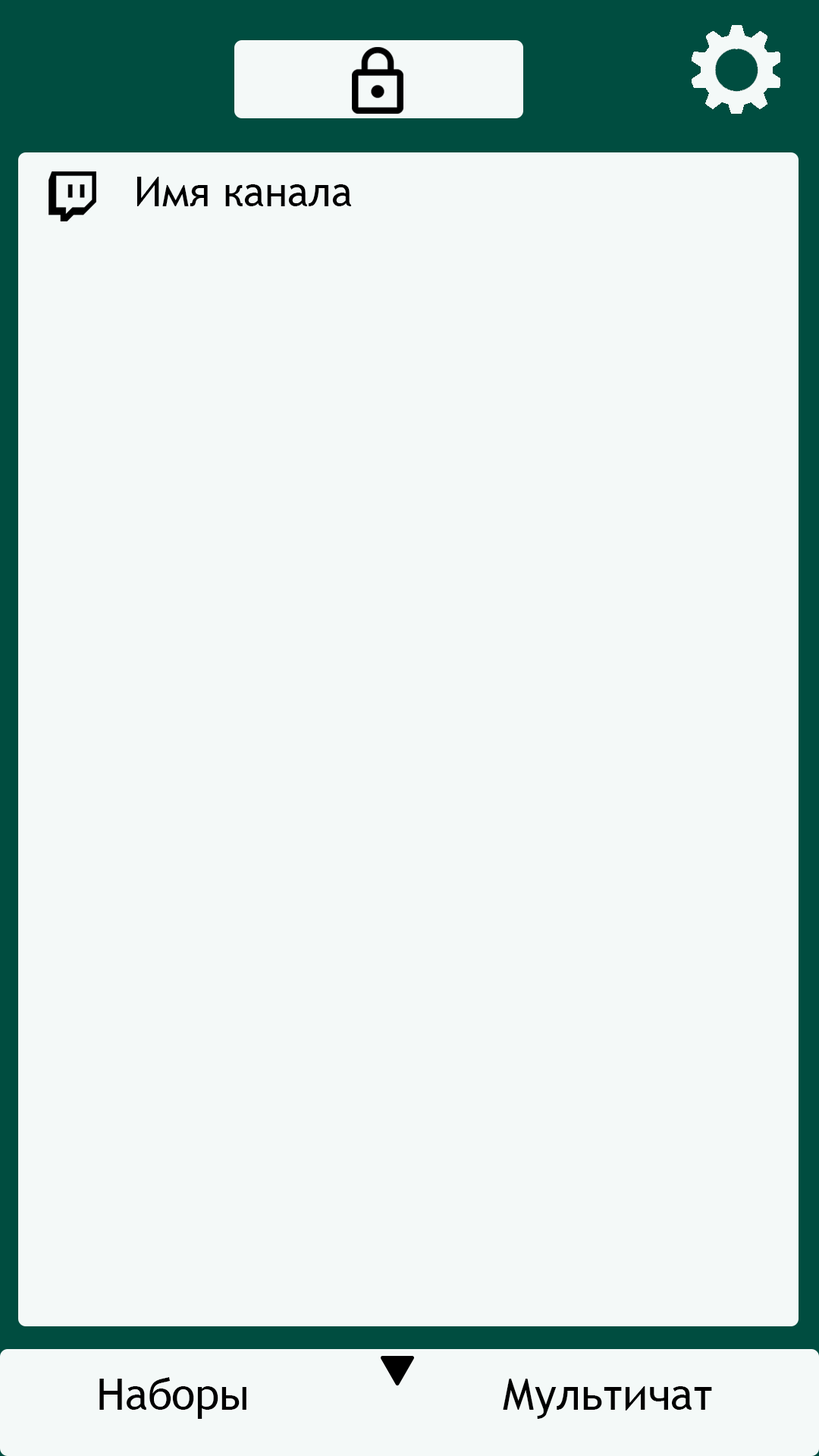
<style>
.page{position:relative;width:819px;height:1456px;background:#f4f9f8}
.page>*{position:absolute;margin:0}
.t1{font:40.7px "TrebuchetMS";color:#000000}
.t2{font:43.6px "TrebuchetMS";color:#000000}
</style>
<div class="page">
<p class="t1" style="left:136px;top:177px;width:215px;height:29px">Имя канала</p>
<p class="t2" style="left:99px;top:1377px;width:147px;height:42px">Наборы</p>
<p class="t2" style="left:503px;top:1379px;width:209px;height:40px">Мультичат</p>
</div>
